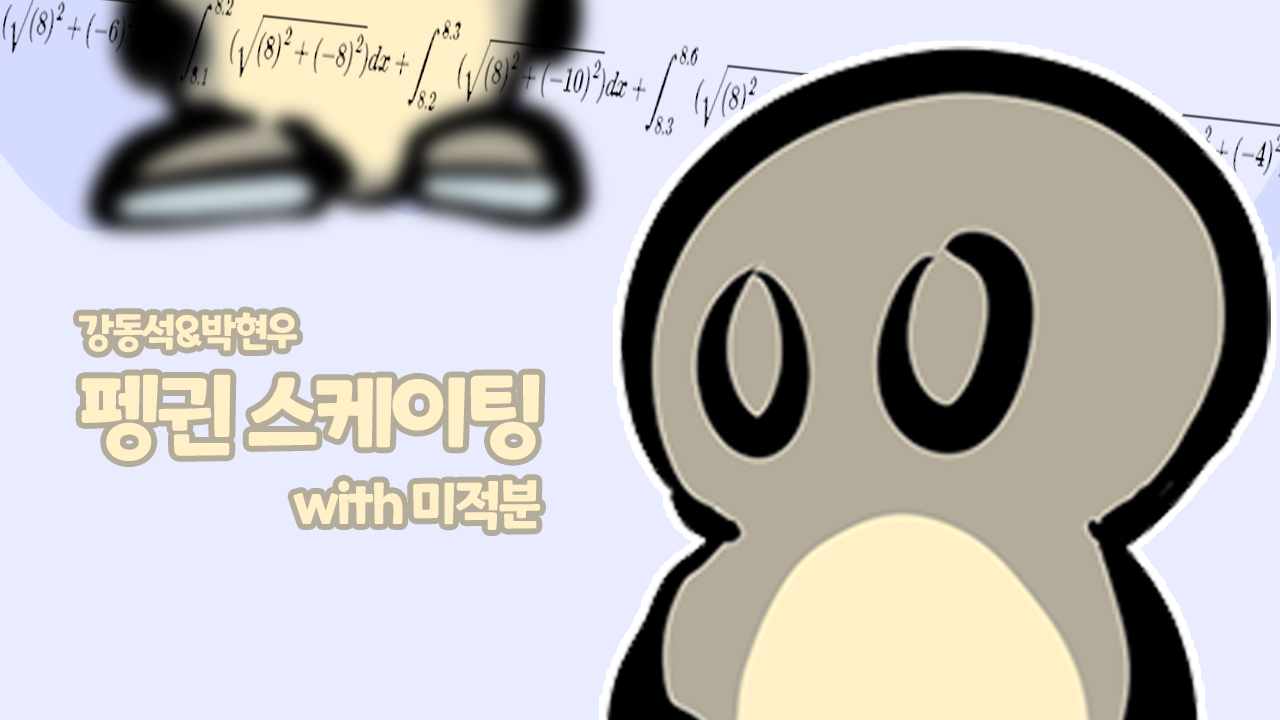
<style>
.page{position:relative;width:1280px;height:720px;background:#e9ecff}
.page>*{position:absolute;margin:0}
.t1{font:40px "ONEMobilePOPOTFRegular";letter-spacing:-0.06em;color:#fff0c7}
.t2{font:91px "ONEMobilePOPOTFRegular";letter-spacing:-0.06em;color:#fff0c7}
.t3{font:54px "ONEMobilePOPOTFRegular";letter-spacing:-0.06em;color:#fff0c7}
</style>
<div class="page">
<p class="t1" style="left:79px;top:312px;width:218px;height:41px">강동석&amp;박현우</p>
<p class="t2" style="left:81px;top:374px;width:459px;height:87px">펭귄 스케이팅</p>
<p class="t3" style="left:293px;top:480px;width:247px;height:50px">with 미적분</p>
</div>
